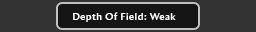
<style>
.page{position:relative;width:256px;height:32px;background:#333333}
.page>*{position:absolute;margin:0}
.t1{font:10px "AmiraParadiso";letter-spacing:0.05em;color:#ffffff}
</style>
<div class="page">
<p class="t1" style="left:73px;top:12px;width:103px;height:10px">Depth Of Field: Weak</p>
</div>
